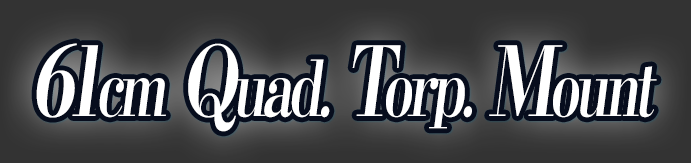
<style>
.page{position:relative;width:691px;height:163px}
.page>*{position:absolute;margin:0}
.t1{font:76.8px "KochoStd-Heavy";letter-spacing:-0.08em;color:#ffffff;font-style:italic;scale:0.73 1}
.t2{font:96px "KochoStd-Heavy";letter-spacing:-0.08em;color:#ffffff;font-style:italic;scale:0.73 1}
</style>
<div class="page">
<p class="t1" style="left:36px;top:43px;width:621px;height:89px"><span class="t2">61</span>cm<span class="t2"> Q</span>uad.<span class="t2"> T</span>orp.<span class="t2"> M</span>ount</p>
</div>
